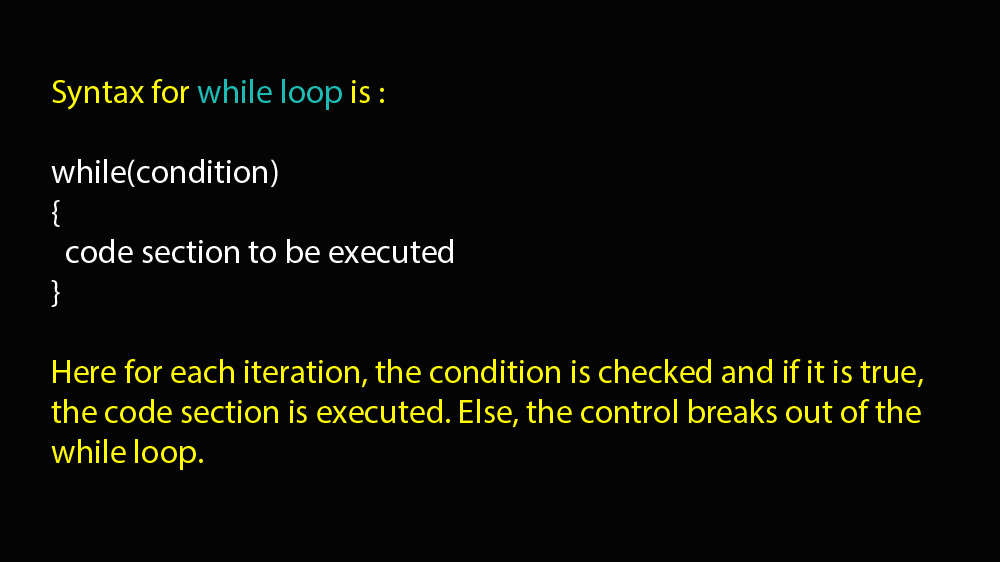
<style>
.page{position:relative;width:1000px;height:562px;background:#050404}
.page>*{position:absolute;margin:0}
.t1{font:33.3px "MyriadPro-Regular";color:#fefb04}
.t2{font:33.3px "MyriadPro-Regular";color:#1cbbb4}
.t3{font:33.3px "MyriadPro-Regular";color:#ffffff}
</style>
<div class="page">
<p class="t1" style="left:51px;top:79px;width:872px;height:391px">Syntax for <span class="t2">while loop</span> is :<br><br><span class="t3">while(condition)<br>{<br>  code section to be executed<br>}<br><br></span>Here for each iteration, the condition is checked and if it is true, the code section is executed. Else, the control breaks out of the while loop.</p>
</div>
